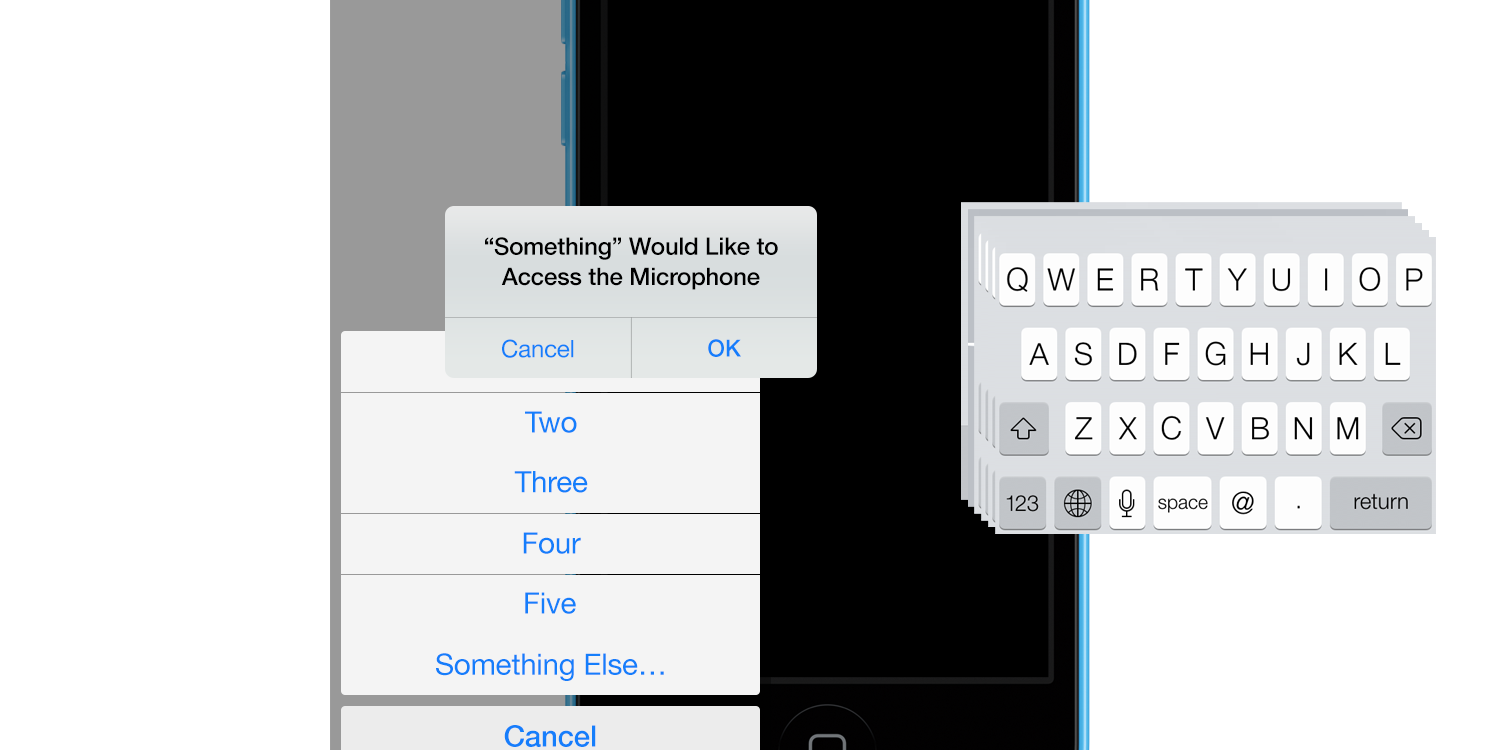
<style>
.page{position:relative;width:1500px;height:750px;background:#ffffff}
.page>*{position:absolute;margin:0}
.t1{font:24.1px/30.3px "HelveticaNeue-Medium";letter-spacing:-0.01em;color:#000000}
.t2{font:24.1px "HelveticaNeue";letter-spacing:-0.01em;color:#157efb}
.t3{font:23.4px "HelveticaNeue-Medium";letter-spacing:-0.01em;color:#157efb}
.t4{font:15.8px "HelveticaNeue";letter-spacing:0.02em;color:#cdd0d3}
.t5{font:29.6px "HelveticaNeue";letter-spacing:-0.01em;color:#157efb}
.t6{font:29.6px "HelveticaNeue-Medium";letter-spacing:-0.01em;color:#157efb}
</style>
<div class="page">
<p class="t1" style="left:485px;top:237px;width:293px;height:53px;text-align:center">“Something” Would Like to<br>Access the Microphone</p>
<p class="t2" style="left:502px;top:339px;width:72px;height:19px">Cancel</p>
<p class="t3" style="left:708px;top:339px;width:33px;height:18px">OK</p>
<p class="t4" style="left:986px;top:391px;width:38px;height:12px">BELL</p>
<p class="t5" style="left:525px;top:411px;width:52px;height:22px">Two</p>
<p class="t5" style="left:514px;top:471px;width:74px;height:22px">Three</p>
<p class="t5" style="left:523px;top:532px;width:58px;height:22px">Four</p>
<p class="t5" style="left:525px;top:592px;width:51px;height:22px">Five</p>
<p class="t5" style="left:436px;top:653px;width:228px;height:28px">Something Else…</p>
<p class="t6" style="left:504px;top:725px;width:92px;height:22px">Cancel</p>
</div>
